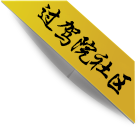
<style>
.page{position:relative;width:140px;height:128px;background:#ffffff}
.page>*{position:absolute;margin:0}
.t1{font:29.8px "STXingkai";letter-spacing:-0.2em;color:#000000}
</style>
<div class="page">
<p class="t1" style="left:37px;top:3px;width:95px;height:92px;rotate:44deg">过驾院社区</p>
</div>
